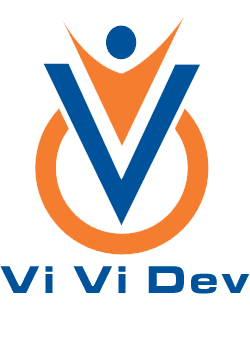
<style>
.page{position:relative;width:250px;height:343px;background:#ffffff}
.page>*{position:absolute;margin:0}
.t1{font:40px "MicrogrammaD-BoldExte";letter-spacing:0.12em;color:#00539b}
</style>
<div class="page">
<p class="t1" style="left:0px;top:266px;width:250px;height:28px">Vi Vi Dev</p>
</div>
